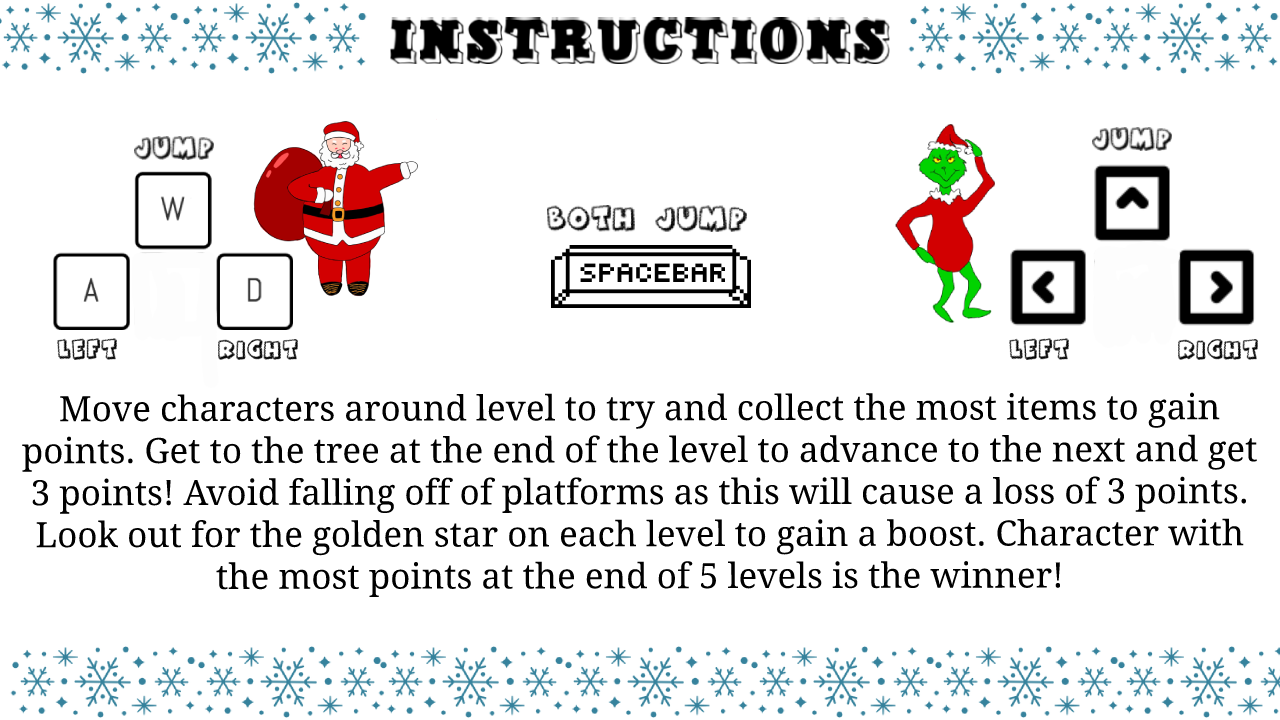
<style>
.page{position:relative;width:1280px;height:720px;background:#ffffff}
.page>*{position:absolute;margin:0}
.t1{font:35px "DroidSerif";color:#000000}
</style>
<div class="page">
<p class="t1" style="left:22px;top:392px;width:1235px;height:206px;text-align:center">Move characters around level to try and collect the most items to gain points. Get to the tree at the end of the level to advance to the next and get 3 points! Avoid falling off of platforms as this will cause a loss of 3 points. Look out for the golden star on each level to gain a boost. Character with the most points at the end of 5 levels is the winner!</p>
</div>
